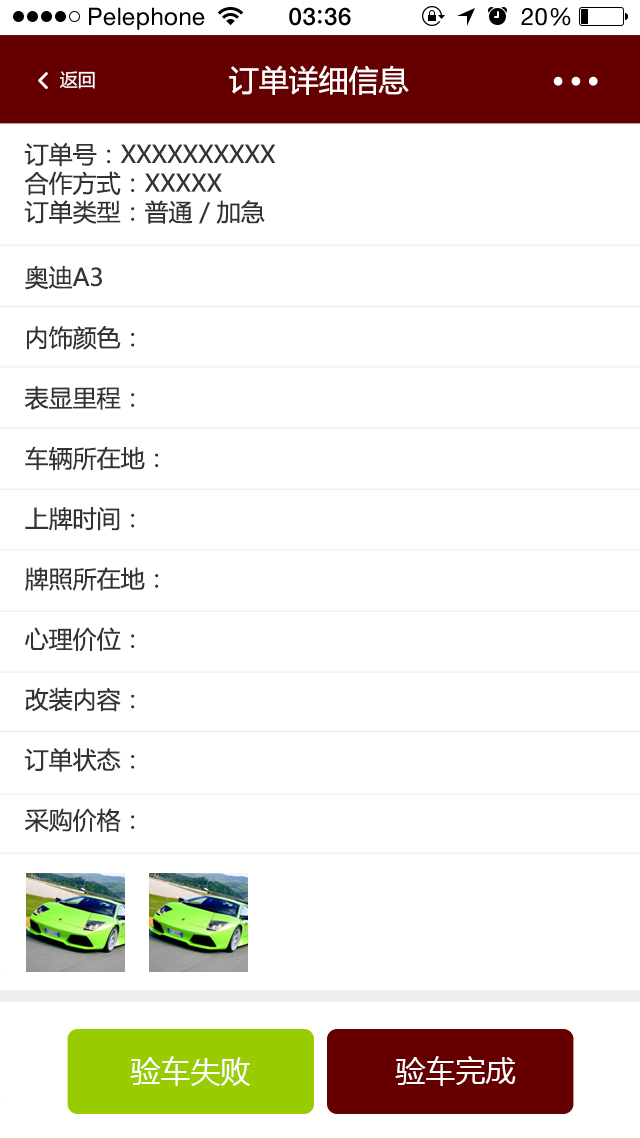
<style>
.page{position:relative;width:640px;height:1138px;background:#ffffff}
.page>*{position:absolute;margin:0}
.t1{font:24px "HelveticaNeue";letter-spacing:0.02em;color:#000000}
.t2{font:24px "HelveticaNeue-Medium";letter-spacing:0.03em;color:#000000}
.t3{font:29.9px "MicrosoftYaHei";color:#ffffff}
.t4{font:18px "MicrosoftYaHei";color:#ffffff}
.t5{font:24px "MicrosoftYaHei";color:#333333}
.t6{font:24px/60.3px "MicrosoftYaHei";color:#333333}
.t7{font:30px "MicrosoftYaHei";color:#ffffff}
</style>
<div class="page">
<p class="t1" style="left:89px;top:7px;width:116px;height:23px">Pelephone</p>
<p class="t2" style="left:289px;top:7px;width:62px;height:19px">03 36</p>
<p class="t1" style="left:521px;top:7px;width:50px;height:19px">20%</p>
<p class="t3" style="left:229px;top:65px;width:180px;height:30px">订单详细信息</p>
<p class="t4" style="left:60px;top:71px;width:35px;height:18px">返回</p>
<p class="t5" style="left:24px;top:142px;width:252px;height:82px">订单号：XXXXXXXXXX<br>合作方式：XXXXX<br>订单类型：普通／加急</p>
<p class="t6" style="left:24px;top:265px;width:135px;height:567px">奥迪A3<br>内饰颜色：<br>表显里程：<br>车辆所在地：<br>上牌时间：<br>牌照所在地：<br>心理价位：<br>改装内容：<br>订单状态：<br>采购价格：</p>
<p class="t7" style="left:130px;top:1056px;width:121px;height:30px">验车失败</p>
<p class="t7" style="left:395px;top:1056px;width:121px;height:30px">验车完成</p>
</div>
